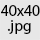
<style>
.page{position:relative;width:40px;height:40px;background:#e7e7e7}
.page>*{position:absolute;margin:0}
.t1{font:15.6px "MyriadPro-Regular";color:#000000}
</style>
<div class="page">
<p class="t1" style="left:1px;top:5px;width:39px;height:11px">40x40</p>
<p class="t1" style="left:7px;top:20px;width:24px;height:14px">.jpg</p>
</div>
